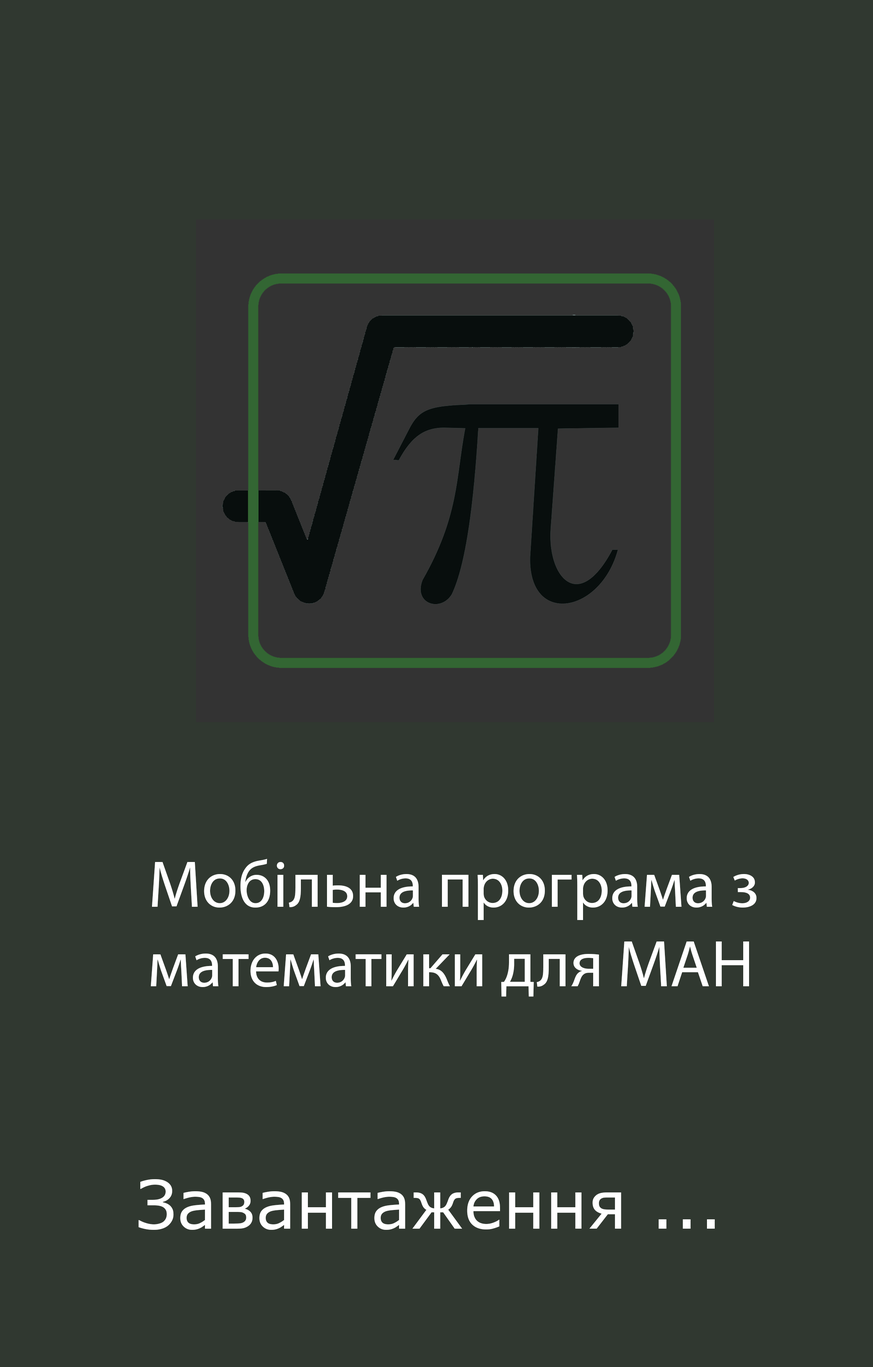
<style>
.page{position:relative;width:873px;height:1367px;background:#303830}
.page>*{position:absolute;margin:0}
.t1{font:66.2px "MyriadPro-Regular";color:#ffffff}
.t2{font:66.2px "MSReferenceSansSerif";color:#ffffff}
</style>
<div class="page">
<p class="t1" style="left:151px;top:859px;width:605px;height:137px">Мобільна програма з математики для МАН</p>
<p class="t2" style="left:138px;top:1179px;width:576px;height:50px">Завантаження ...</p>
</div>
